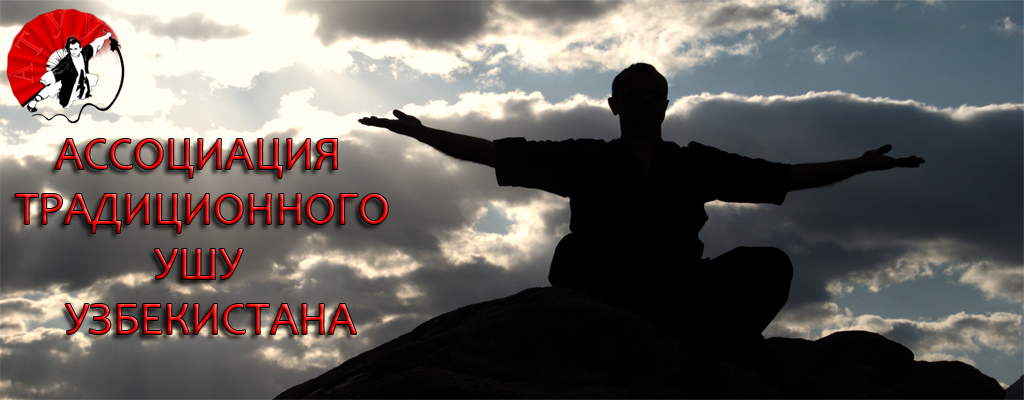
<style>
.page{position:relative;width:1024px;height:400px}
.page>*{position:absolute;margin:0}
.t1{font:45.8px "Candara"}
</style>
<div class="page">
<p class="t1" style="left:15px;top:139px;width:373px;height:195px">АССОЦИАЦИЯ<br>ТРАДИЦИОННОГО<br>              УШУ<br>     УЗБЕКИСТАНА</p>
</div>
